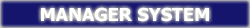
<style>
.page{position:relative;width:250px;height:28px}
.page>*{position:absolute;margin:0}
.t1{font:18px "Tahoma-Bold";color:#fefefe}
</style>
<div class="page">
<p class="t1" style="left:41px;top:7px;width:168px;height:15px">MANAGER SYSTEM</p>
</div>
